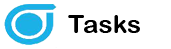
<style>
.page{position:relative;width:171px;height:49px;background:#ffffff}
.page>*{position:absolute;margin:0}
.t1{font:18.7px "ArialRoundedMTBold";color:#000000;scale:1.04 1}
</style>
<div class="page">
<p class="t1" style="left:68px;top:15px;width:72px;height:18px">Tasks</p>
</div>
